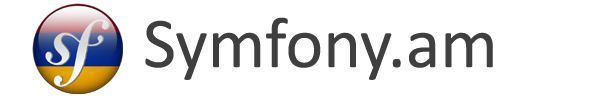
<style>
.page{position:relative;width:600px;height:100px;background:#ffffff}
.page>*{position:absolute;margin:0}
.t1{font:72px "Calibri";color:#3f3f3f}
</style>
<div class="page">
<p class="t1" style="left:145px;top:17px;width:348px;height:63px">Symfony.am</p>
</div>
